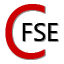
<style>
.page{position:relative;width:64px;height:64px;background:#ffffff}
.page>*{position:absolute;margin:0}
.t1{font:75px "SegoeUI";color:#cc0000}
.t2{font:25px "SegoeUI";color:#000000}
</style>
<div class="page">
<p class="t1" style="left:5px;top:4px;width:40px;height:55px">C</p>
<p class="t2" style="left:22px;top:23px;width:36px;height:18px">FSE</p>
</div>
